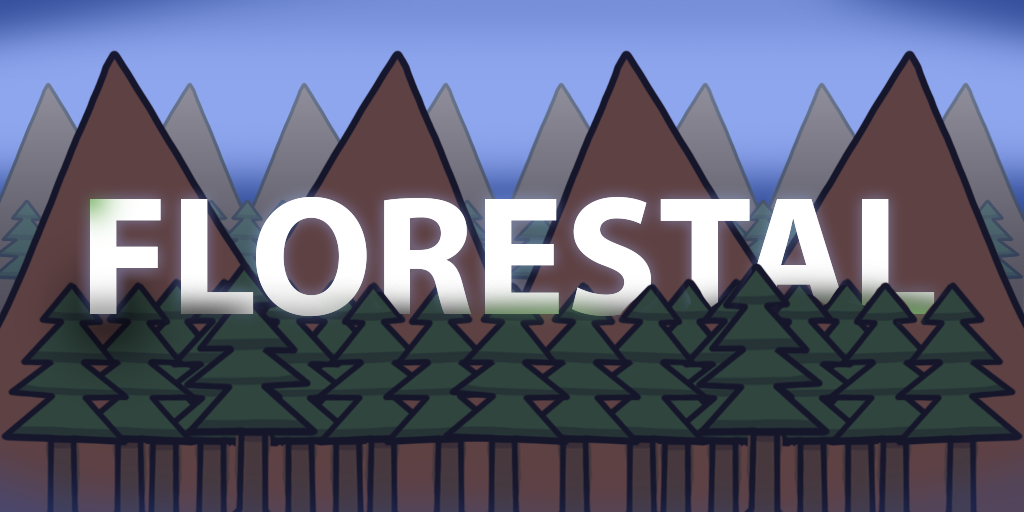
<style>
.page{position:relative;width:1024px;height:512px}
.page>*{position:absolute;margin:0}
.t1{font:170.9px "MyriadPro-Bold";color:#ffffff}
</style>
<div class="page">
<p class="t1" style="left:90px;top:196px;width:845px;height:120px">FLORESTAL</p>
<p class="t1" style="left:90px;top:196px;width:845px;height:120px">FLORESTAL</p>
</div>
